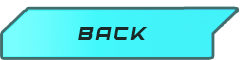
<style>
.page{position:relative;width:250px;height:60px;background:#ffffff}
.page>*{position:absolute;margin:0}
.t1{font:18px "UnitedKingdom";letter-spacing:0.13em;color:#1b2929;font-style:italic}
</style>
<div class="page">
<p class="t1" style="left:78px;top:27px;width:70px;height:13px">Back</p>
</div>
